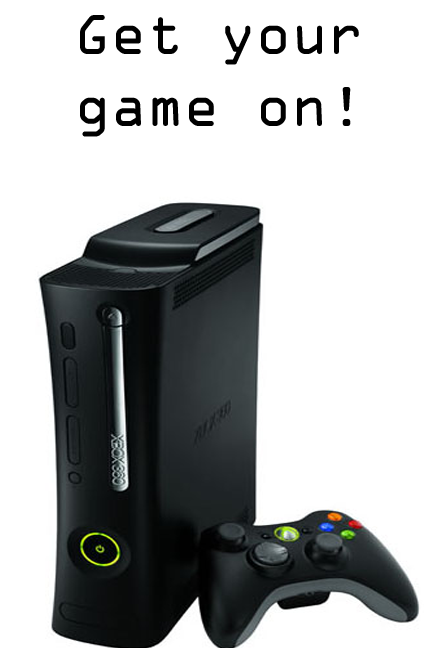
<style>
.page{position:relative;width:432px;height:648px;background:#ffffff}
.page>*{position:absolute;margin:0}
.t1{font:60px "OCRAExtended";color:#000000}
</style>
<div class="page">
<p class="t1" style="left:80px;top:15px;width:279px;height:122px;text-align:center">Get your game on!</p>
</div>
